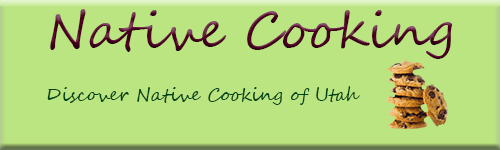
<style>
.page{position:relative;width:500px;height:150px;background:#bbe581}
.page>*{position:absolute;margin:0}
.t1{font:50px "SegoeScript";color:#4e0022}
.t2{font:50px "SegoeScript";color:#b2680e}
.t3{font:18px "SegoeScript";color:#004317}
</style>
<div class="page">
<p class="t1" style="left:50px;top:9px;width:403px;height:50px">Native Cooking <span class="t2">Cooking</span></p>
<p class="t3" style="left:47px;top:86px;width:313px;height:19px">Discover Native Cooking of Utah</p>
</div>
